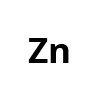
<style>
.page{position:relative;width:100px;height:100px;background:#ffffff}
.page>*{position:absolute;margin:0}
.t1{font:35px "OpenSans-Bold";color:#000000}
</style>
<div class="page">
<p class="t1" style="left:28px;top:38px;width:41px;height:25px">Zn</p>
</div>
